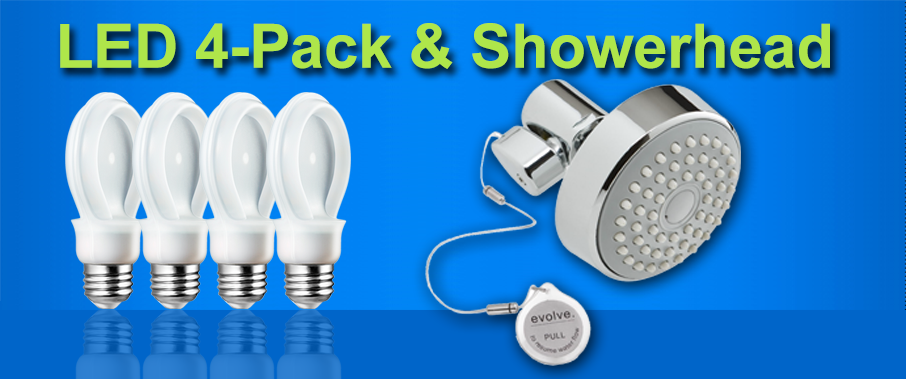
<style>
.page{position:relative;width:906px;height:379px}
.page>*{position:absolute;margin:0}
.t1{font:61.6px "Arial-BoldMT";letter-spacing:-0.005em;color:#afe64a}
</style>
<div class="page">
<p class="t1" style="left:60px;top:23px;width:770px;height:46px">LED 4-Pack &amp; Showerhead</p>
</div>
